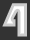
<style>
.page{position:relative;width:30px;height:40px;background:#333333}
.page>*{position:absolute;margin:0}
.t1{font:50px "Bauhaus93";letter-spacing:0.2em}
</style>
<div class="page">
<p class="t1" style="left:2px;top:3px;width:25px;height:34px">4</p>
</div>
